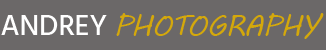
<style>
.page{position:relative;width:326px;height:50px;background:#6b6868}
.page>*{position:absolute;margin:0}
.t1{font:29px "MVBoli";color:#d4a80b;scale:0.96 1}
.t2{font:29px "Hind-Medium";color:#ffffff}
</style>
<div class="page">
<p class="t1" style="left:1px;top:13px;width:323px;height:26px"><span class="t2">ANDREY </span>PHOTOGRAPHY</p>
</div>
